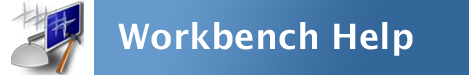
<style>
.page{position:relative;width:469px;height:75px}
.page>*{position:absolute;margin:0}
.t1{font:35px "LucidaGrande-Bold";letter-spacing:0.002em;color:#ffffff}
</style>
<div class="page">
<p class="t1" style="left:118px;top:22px;width:295px;height:34px">Workbench Help</p>
</div>
